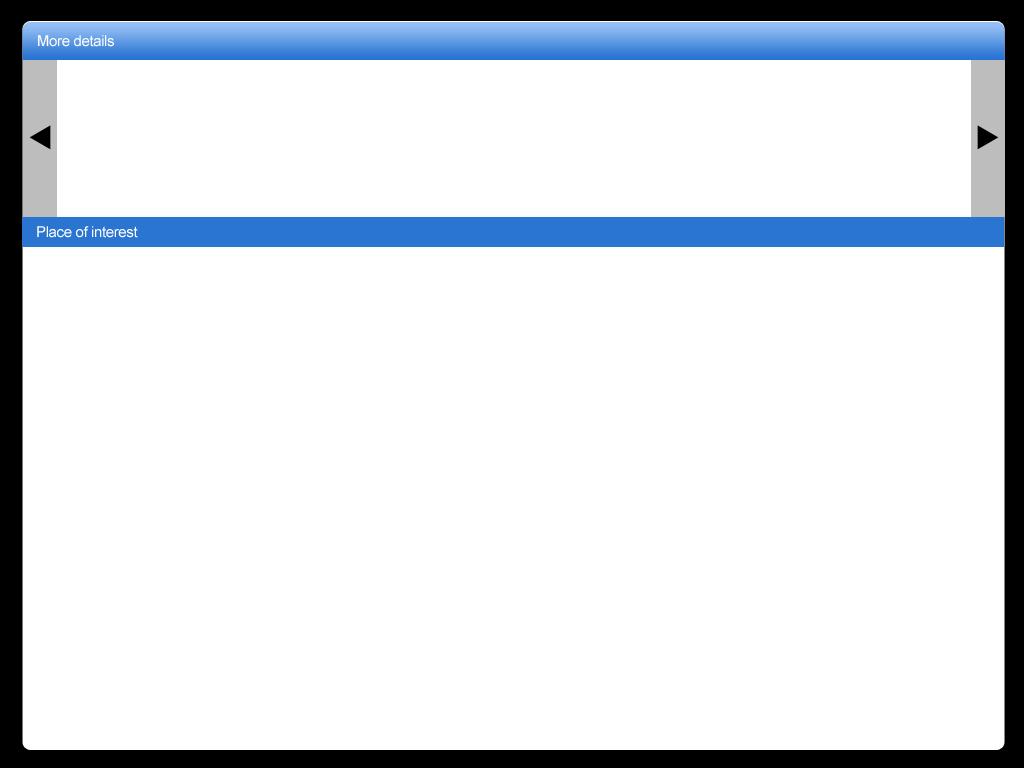
<style>
.page{position:relative;width:1024px;height:768px;background:#ffffff}
.page>*{position:absolute;margin:0}
.t1{font:15px "ArialMT";letter-spacing:-0.025em;color:#ffffff}
</style>
<div class="page">
<p class="t1" style="left:38px;top:35px;width:76px;height:12px">More details</p>
<p class="t1" style="left:37px;top:226px;width:101px;height:12px">Place of interest</p>
</div>
